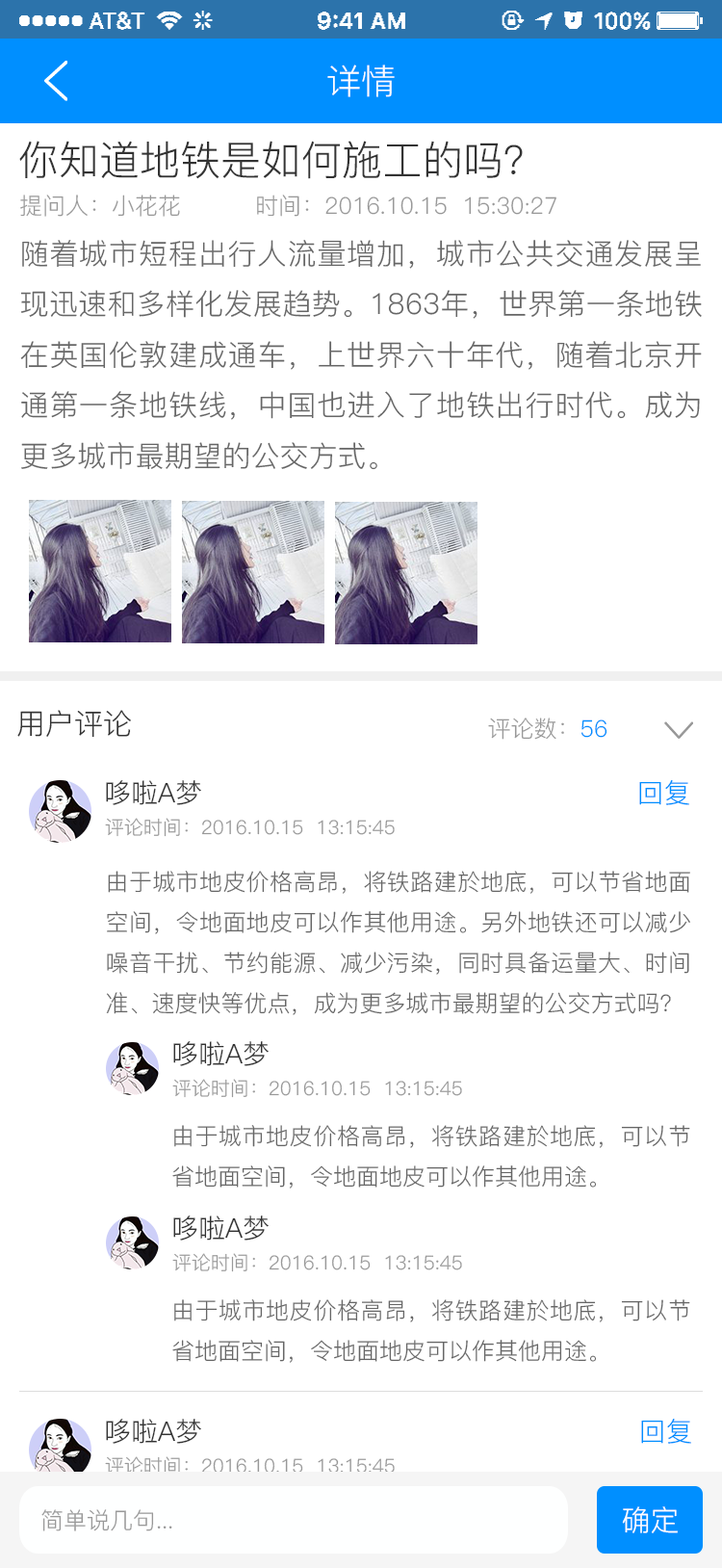
<style>
.page{position:relative;width:722px;height:1568px;background:#ffffff}
.page>*{position:absolute;margin:0}
.t1{font:34.7px "PingFang-SC-Regular";color:#ffffff}
.t2{font:40.5px "PingFang-SC-Regular";color:#333333}
.t3{font:23.1px "PingFang-SC-Regular";color:#999999}
.t4{font:28.9px "PingFang-SC-Regular";color:#666666}
.t5{font:28.9px "PingFang-SC-Regular";color:#333333}
.t6{font:23.1px "PingFang-SC-Regular";color:#008fff}
.t7{font:27px "PingFang-SC-Regular";color:#333333}
.t8{font:27px "PingFang-SC-Regular";color:#008fff}
.t9{font:19.3px "PingFang-SC-Regular";color:#999999}
.t10{font:23.1px "PingFang-SC-Regular";color:#666666}
.t11{font:28.9px "PingFang-SC-Regular";color:#ffffff}
</style>
<div class="page">
<p class="t1" style="left:327px;top:65px;width:68px;height:32px">详情</p>
<p class="t2" style="left:19px;top:141px;width:504px;height:38px">你知道地铁是如何施工的吗？</p>
<p class="t3" style="left:20px;top:195px;width:160px;height:22px">提问人：小花花</p>
<p class="t3" style="left:257px;top:195px;width:300px;height:22px">时间：2016.10.15  15:30:27</p>
<p class="t4" style="left:20px;top:240px;width:682px;height:230px;text-align:justify">随着城市短程出行人流量增加，城市公共交通发展呈现迅速和多样化发展趋势。1863年，世界第一条地铁在英国伦敦建成通车，上世界六十年代，随着北京开通第一条地铁线，中国也进入了地铁出行时代。成为更多城市最期望的公交方式。</p>
<p class="t5" style="left:17px;top:710px;width:114px;height:28px">用户评论</p>
<p class="t3" style="left:488px;top:718px;width:120px;height:22px">评论数：<span class="t6">56</span></p>
<p class="t7" style="left:106px;top:780px;width:95px;height:25px">哆啦A梦</p>
<p class="t8" style="left:640px;top:780px;width:50px;height:25px">回复</p>
<p class="t9" style="left:105px;top:818px;width:290px;height:19px">评论时间：2016.10.15  13:15:45</p>
<p class="t10" style="left:106px;top:871px;width:585px;height:144px;text-align:justify">由于城市地皮价格高昂，将铁路建於地底，可以节省地面空间，令地面地皮可以作其他用途。另外地铁还可以减少噪音干扰、节约能源、减少污染，同时具备运量大、时间准、速度快等优点，成为更多城市最期望的公交方式吗？</p>
<p class="t7" style="left:173px;top:1041px;width:96px;height:25px">哆啦A梦</p>
<p class="t9" style="left:172px;top:1079px;width:290px;height:19px">评论时间：2016.10.15  13:15:45</p>
<p class="t10" style="left:172px;top:1125px;width:519px;height:64px;text-align:justify">由于城市地皮价格高昂，将铁路建於地底，可以节省地面空间，令地面地皮可以作其他用途。</p>
<p class="t7" style="left:173px;top:1215px;width:96px;height:26px">哆啦A梦</p>
<p class="t9" style="left:172px;top:1253px;width:290px;height:19px">评论时间：2016.10.15  13:15:45</p>
<p class="t10" style="left:172px;top:1299px;width:519px;height:64px;text-align:justify">由于城市地皮价格高昂，将铁路建於地底，可以节省地面空间，令地面地皮可以作其他用途。</p>
<p class="t7" style="left:106px;top:1419px;width:95px;height:25px">哆啦A梦</p>
<p class="t8" style="left:641px;top:1419px;width:51px;height:25px">回复</p>
<p class="t9" style="left:105px;top:1456px;width:290px;height:20px">评论时间：2016.10.15  13:15:45</p>
<p class="t3" style="left:41px;top:1509px;width:131px;height:22px">简单说几句...</p>
<p class="t11" style="left:622px;top:1506px;width:56px;height:27px">确定</p>
</div>
